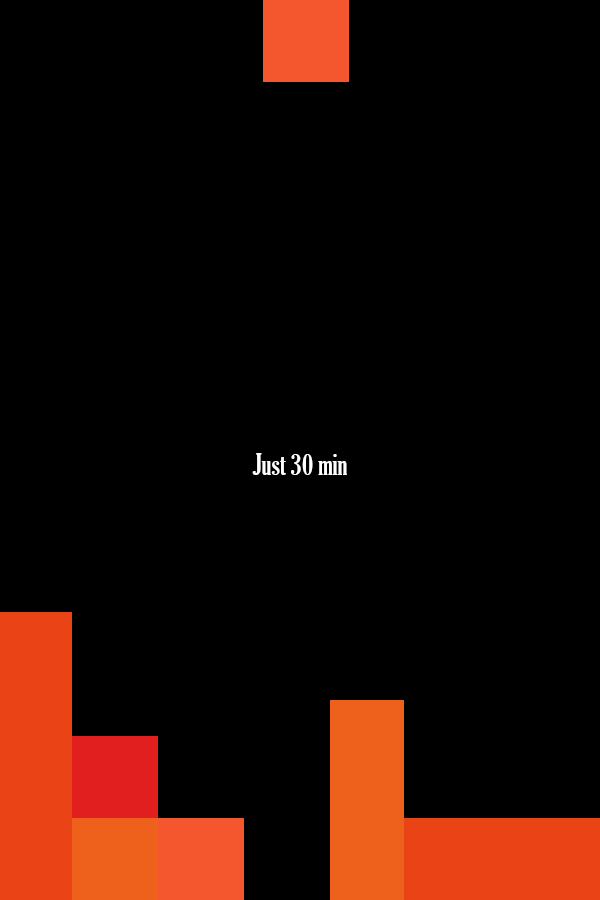
<style>
.page{position:relative;width:600px;height:900px;background:#000000}
.page>*{position:absolute;margin:0}
.t1{font:28.9px "GloucesterMT-ExtraCondensed";color:#ffffff}
</style>
<div class="page">
<p class="t1" style="left:252px;top:453px;width:95px;height:22px">Just 30 min</p>
</div>
